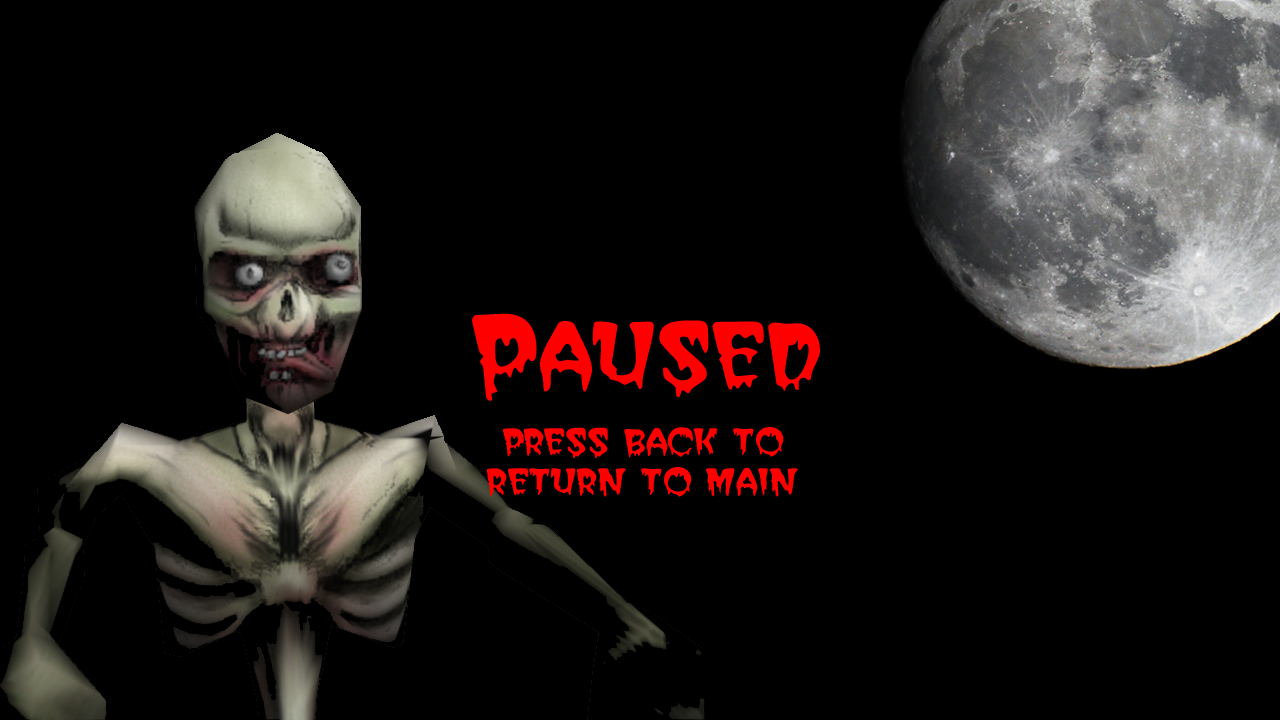
<style>
.page{position:relative;width:1280px;height:720px;background:#000000}
.page>*{position:absolute;margin:0}
.t1{font:83px "CreeperRegularSWFTE";color:#ff0000}
.t2{font:33px "CreeperRegularSWFTE";color:#ff0000}
</style>
<div class="page">
<p class="t1" style="left:472px;top:313px;width:348px;height:88px">Paused</p>
<p class="t2" style="left:487px;top:427px;width:311px;height:70px;text-align:center">press back to return to main menu</p>
</div>
